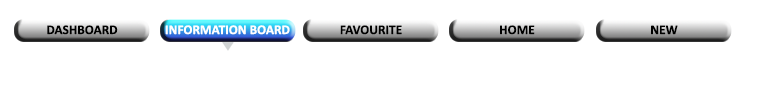
<style>
.page{position:relative;width:760px;height:100px;background:#ffffff}
.page>*{position:absolute;margin:0}
.t1{font:13.3px "Calibri-Bold";color:#000000}
.t2{font:13.3px "Calibri-Bold";color:#ffffff}
</style>
<div class="page">
<p class="t1" style="left:47px;top:25px;width:71px;height:10px">DASHBOARD</p>
<p class="t2" style="left:165px;top:25px;width:125px;height:10px">INFORMATION BOARD</p>
<p class="t1" style="left:340px;top:25px;width:62px;height:10px">FAVOURITE</p>
<p class="t1" style="left:500px;top:25px;width:35px;height:10px">HOME</p>
<p class="t1" style="left:651px;top:25px;width:27px;height:10px">NEW</p>
</div>
